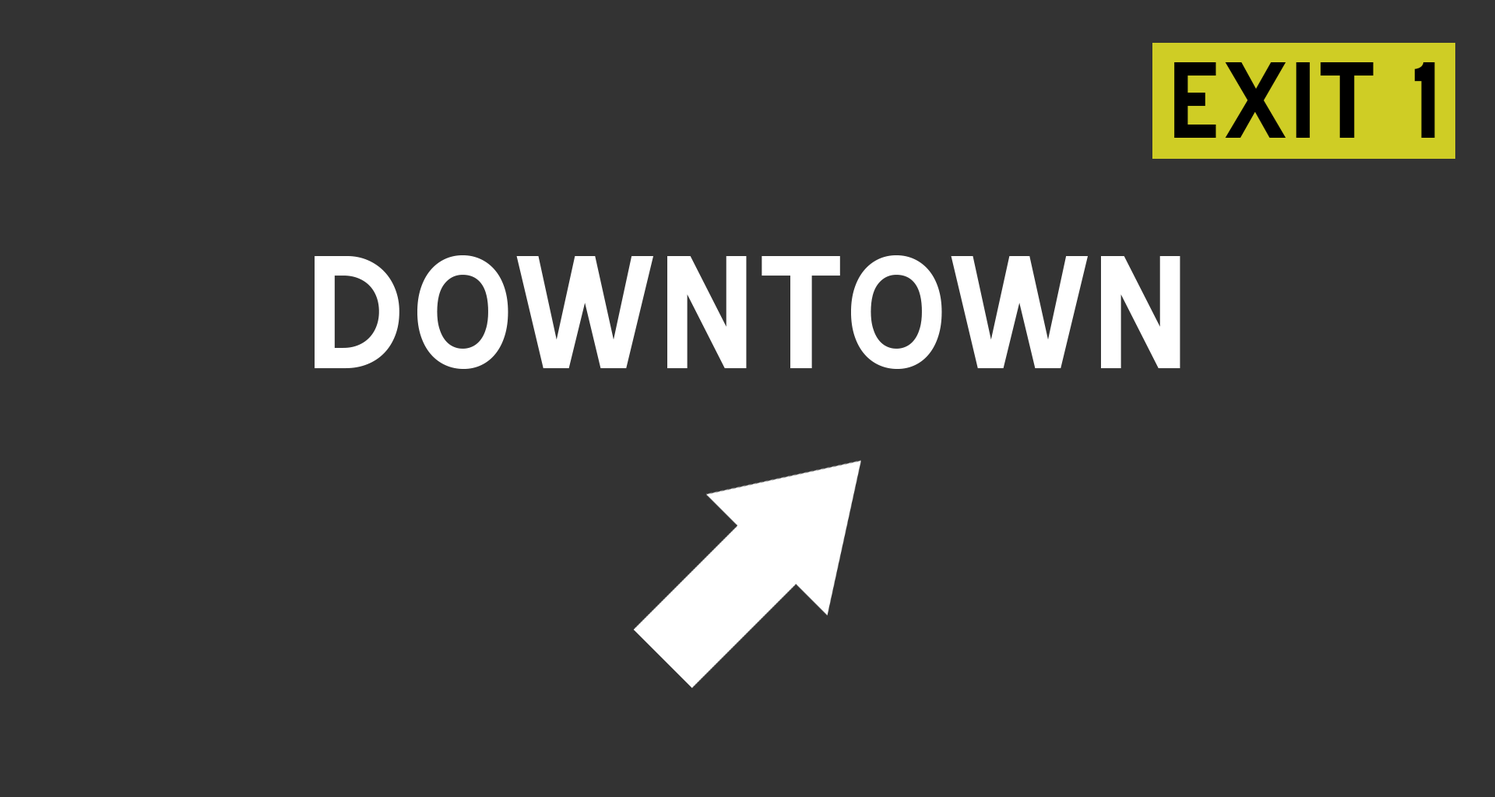
<style>
.page{position:relative;width:1495px;height:797px;background:#333333}
.page>*{position:absolute;margin:0}
.t1{font:105.1px "BlueHighway-Bold";letter-spacing:0.02em;color:#000000}
.t2{font:155.8px "BlueHighway-Bold";letter-spacing:0.02em;color:#ffffff}
</style>
<div class="page">
<p class="t1" style="left:1174px;top:62px;width:261px;height:76px">EXIT 1</p>
<p class="t2" style="left:315px;top:255px;width:866px;height:114px">DOWNTOWN</p>
</div>
